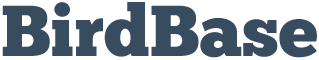
<style>
.page{position:relative;width:319px;height:60px;background:#384c60}
.page>*{position:absolute;margin:0}
.t1{font:72px "ChunkFive-Roman";color:#384c60}
</style>
<div class="page">
<p class="t1" style="left:2px;top:2px;width:315px;height:56px">BirdBase</p>
</div>
